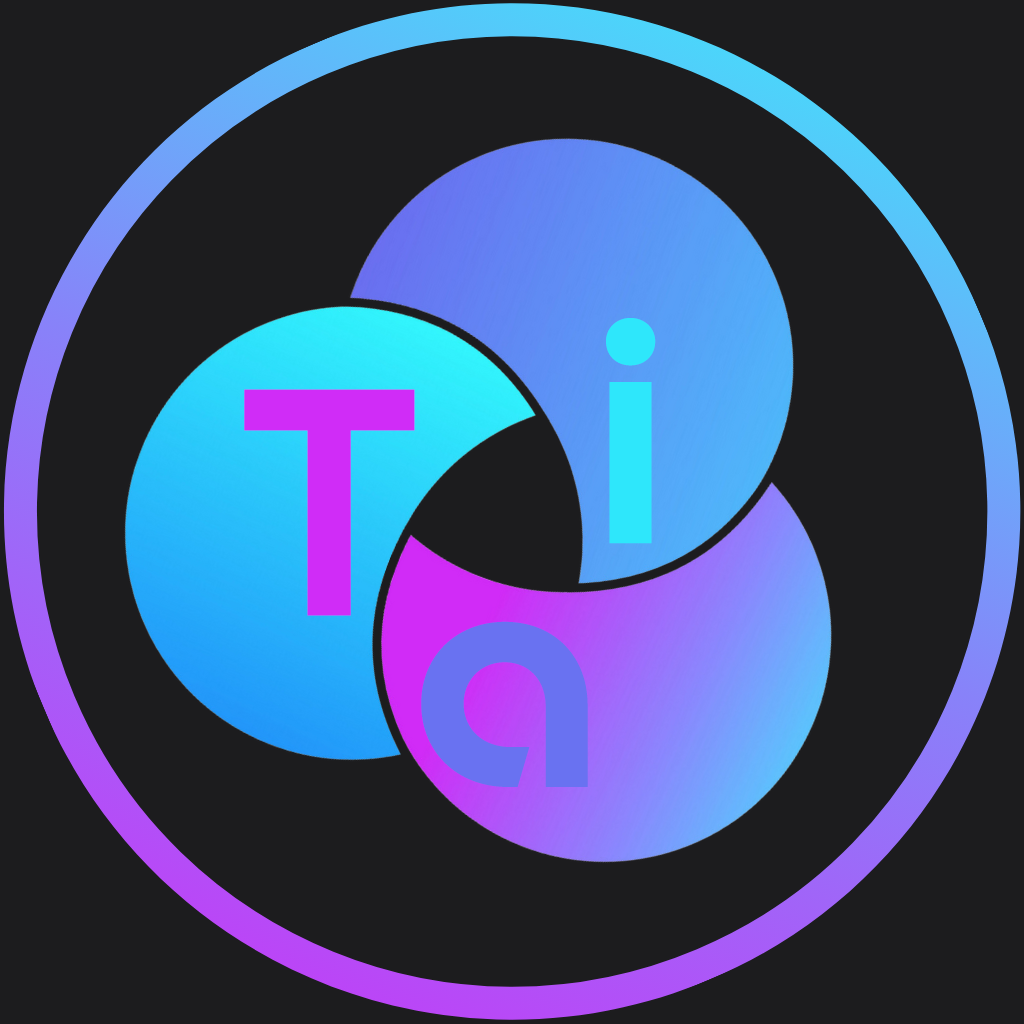
<style>
.page{position:relative;width:1024px;height:1024px;background:#1c1c1e}
.page>*{position:absolute;margin:0}
.t1{font:333.3px "NewAstro-SemiBold";color:#2ee7fb}
.t2{font:333.3px "NewAstro-SemiBold";color:#d02cf7}
.t3{font:333.3px "NewAstro-SemiBold";color:#6972f1}
</style>
<div class="page">
<p class="t1" style="left:606px;top:318px;width:50px;height:226px">i</p>
<p class="t2" style="left:244px;top:389px;width:171px;height:227px">T</p>
<p class="t3" style="left:421px;top:621px;width:167px;height:166px">a</p>
</div>
